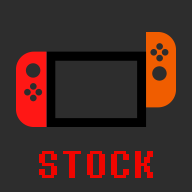
<style>
.page{position:relative;width:192px;height:192px;background:#2d2d2d}
.page>*{position:absolute;margin:0}
.t1{font:36px "BIG-SHOT";color:#f00500}
</style>
<div class="page">
<p class="t1" style="left:39px;top:151px;width:114px;height:27px">STOCK</p>
</div>
